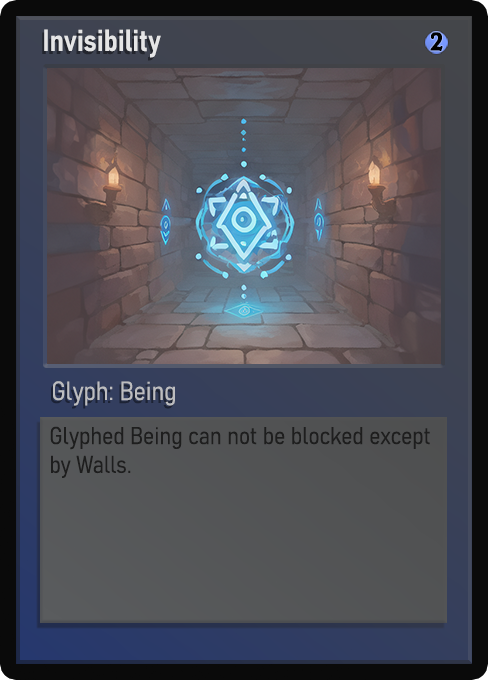
<style>
.page{position:relative;width:488px;height:680px}
.page>*{position:absolute;margin:0}
.t1{font:30px "Bahnschrift-SemiBoldSemiCondensed";color:#f2f2f2;font-weight:bold}
.t2{font:25px "WTRRoycroft";color:#000000;font-weight:bold;scale:1.09 1}
.t3{font:26px "Bahnschrift-LightSemiCondensed";color:#c8c8c8;font-weight:bold}
.t4{font:24px "Bahnschrift-LightSemiCondensed";color:#1e1e1e;font-weight:bold}
</style>
<div class="page">
<p class="t1" style="left:44px;top:29px;width:117px;height:29px;opacity:0.9">Invisibility</p>
<p class="t2" style="left:430px;top:32px;width:13px;height:19px">2</p>
<p class="t3" style="left:53px;top:381px;width:122px;height:25px;opacity:0.9">Glyph: Being</p>
<p class="t4" style="left:50px;top:426px;width:380px;height:52px">Glyphed Being can not be blocked except by Walls.</p>
</div>
